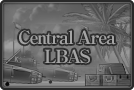
<style>
.page{position:relative;width:134px;height:90px}
.page>*{position:absolute;margin:0}
.t1{font:18px/19px "RyuminPro-ExBold";letter-spacing:-0.08em;color:#a4a4a4}
</style>
<div class="page">
<p class="t1" style="left:19px;top:30px;width:97px;height:34px;text-align:center">Central Area<br>LBAS</p>
</div>
